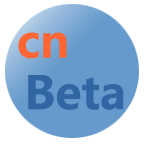
<style>
.page{position:relative;width:144px;height:144px;background:#669acc}
.page>*{position:absolute;margin:0}
.t1{font:45px "MicrosoftYaHei-Bold";color:#ff6633}
.t2{font:45px "MicrosoftYaHei-Bold";color:#3165a3}
</style>
<div class="page">
<p class="t1" style="left:18px;top:32px;width:49px;height:27px">cn</p>
<p class="t2" style="left:28px;top:75px;width:96px;height:35px">Beta</p>
</div>
